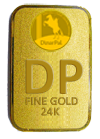
<style>
.page{position:relative;width:100px;height:139px;background:#ffffff}
.page>*{position:absolute;margin:0}
.t1{font:54.4px "Calibri-Bold";color:#ad8a16}
.t2{font:12px/10.7px "Calibri-Bold";color:#ad8a16}
</style>
<div class="page">
<p class="t1" style="left:25px;top:59px;width:59px;height:35px">DP</p>
<p class="t2" style="left:25px;top:97px;width:53px;height:19px;text-align:center">FINE GOLD<br>24K</p>
</div>
